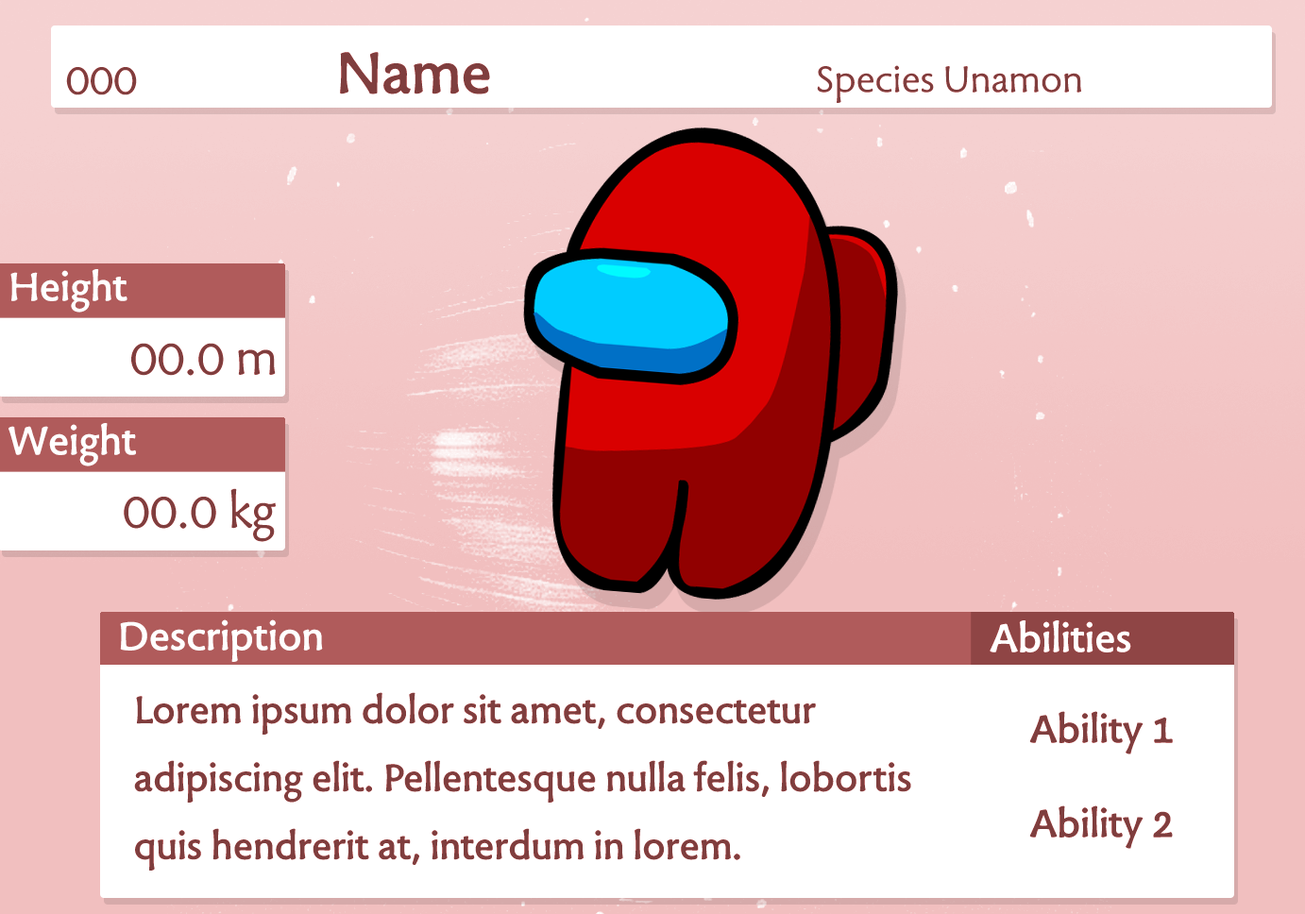
<style>
.page{position:relative;width:1305px;height:914px;background:#ffffff}
.page>*{position:absolute;margin:0}
.t1{font:68px "TuffW01-Bold";color:#7f3e3e}
.t2{font:42.8px "TuffW01-Normal";color:#7f3e3e}
.t3{font:49.5px "TuffW01-Normal";color:#803e3e}
.t4{font:46.3px "TuffW01-Bold";color:#ffffff}
.t5{font:56.7px "TuffW01-Normal";color:#7f3e3e}
.t6{font:44.6px/68px "TuffW01-Bold";color:#7f3e3e}
.t7{font:45.3px/94.4px "TuffW01-Bold";color:#7f3e3e}
</style>
<div class="page">
<p class="t1" style="left:340px;top:52px;width:150px;height:42px">Name</p>
<p class="t2" style="left:817px;top:65px;width:264px;height:38px">Species Unamon</p>
<p class="t3" style="left:66px;top:67px;width:71px;height:28px">000</p>
<p class="t4" style="left:10px;top:269px;width:117px;height:44px">Height</p>
<p class="t5" style="left:131px;top:343px;width:145px;height:33px">00.0 m</p>
<p class="t4" style="left:8px;top:423px;width:128px;height:43px">Weight</p>
<p class="t5" style="left:124px;top:488px;width:152px;height:54px">00.0 kg</p>
<p class="t4" style="left:120px;top:619px;width:203px;height:43px">Description</p>
<p class="t4" style="left:989px;top:620px;width:142px;height:32px">Abilities</p>
<p class="t6" style="left:134px;top:692px;width:777px;height:178px">Lorem ipsum dolor sit amet, consectetur<br>adipiscing elit. Pellentesque nulla felis, lobortis<br>quis hendrerit at, interdum in lorem.</p>
<p class="t7" style="left:1029px;top:711px;width:144px;height:138px;text-align:center">Ability 1<br>Ability 2</p>
</div>
